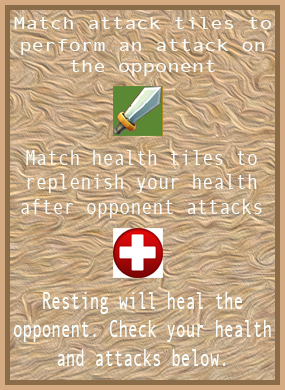
<style>
.page{position:relative;width:285px;height:390px}
.page>*{position:absolute;margin:0}
.t1{font:17.9px "AndaleMono";color:#f9fdf9;scale:1.15 1}
.t2{font:20.8px "AndaleMono";color:#f9fdf9;scale:0.89 1}
.t3{font:23.7px "AndaleMono";color:#f9fdf9;scale:0.68 1}
</style>
<div class="page">
<p class="t1" style="left:14px;top:17px;width:257px;height:59px;text-align:center">Match attack tiles to<br>perform an attack on<br>the opponent</p>
<p class="t2" style="left:21px;top:150px;width:241px;height:68px;text-align:center">Match health tiles to<br>replenish your health<br>after opponent attacks</p>
<p class="t3" style="left:14px;top:292px;width:257px;height:74px;text-align:center">Resting will heal the<br>opponent. Check your health<br>and attacks below.</p>
</div>
